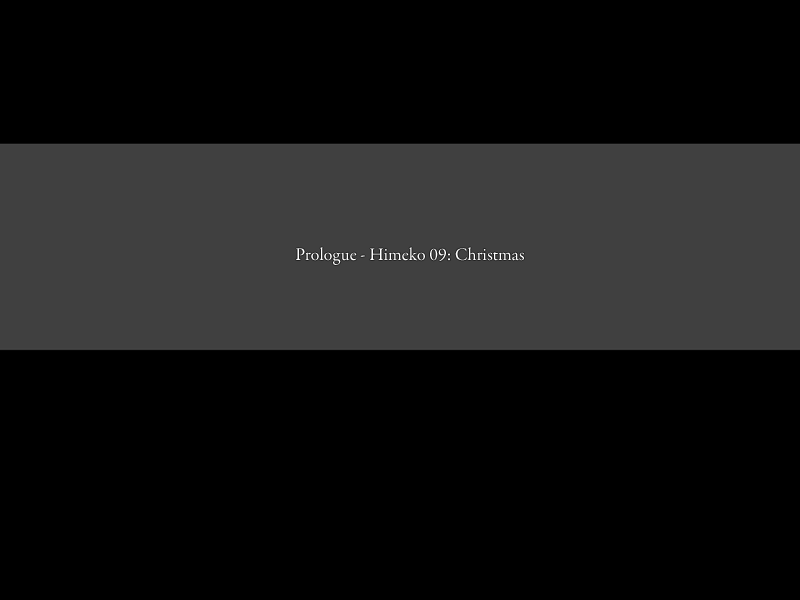
<style>
.page{position:relative;width:800px;height:600px;background:#000000}
.page>*{position:absolute;margin:0}
.t1{font:18px "GaramondPremrPro";color:#ffffff}
</style>
<div class="page">
<p class="t1" style="left:295px;top:247px;width:229px;height:18px">Prologue - Himeko 09: Christmas</p>
</div>
